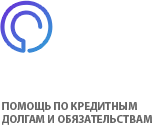
<style>
.page{position:relative;width:160px;height:125px;background:#ffffff}
.page>*{position:absolute;margin:0}
.t1{font:11px "MyriadPro-Bold";color:#666666}
</style>
<div class="page">
<p class="t1" style="left:2px;top:102px;width:150px;height:23px">ПОМОЩЬ ПО КРЕДИТНЫМ<br>ДОЛГАМ И ОБЯЗАТЕЛЬСТВАМ</p>
</div>
